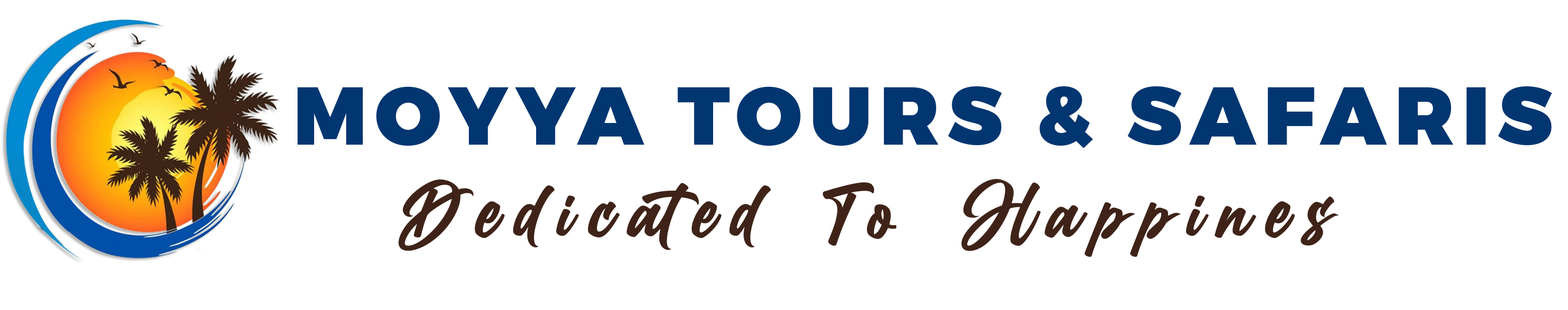
<style>
.page{position:relative;width:1568px;height:310px;background:#ffffff}
.page>*{position:absolute;margin:0}
.t1{font:82.2px "Montserrat-Black";letter-spacing:0.1em;color:#023671}
.t2{font:82.2px "BillionDreams";letter-spacing:0.2em;color:#3f2318}
</style>
<div class="page">
<p class="t1" style="left:298px;top:86px;width:1254px;height:63px">MOYYA TOURS &amp; SAFARIS</p>
<p class="t2" style="left:398px;top:179px;width:941px;height:78px">Dedicated To Happines</p>
</div>
